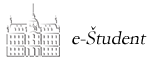
<style>
.page{position:relative;width:148px;height:60px;background:#ffffff}
.page>*{position:absolute;margin:0}
.t1{font:20px "Garamond";color:#000000;font-style:italic}
</style>
<div class="page">
<p class="t1" style="left:72px;top:26px;width:75px;height:19px">e-Študent</p>
</div>
